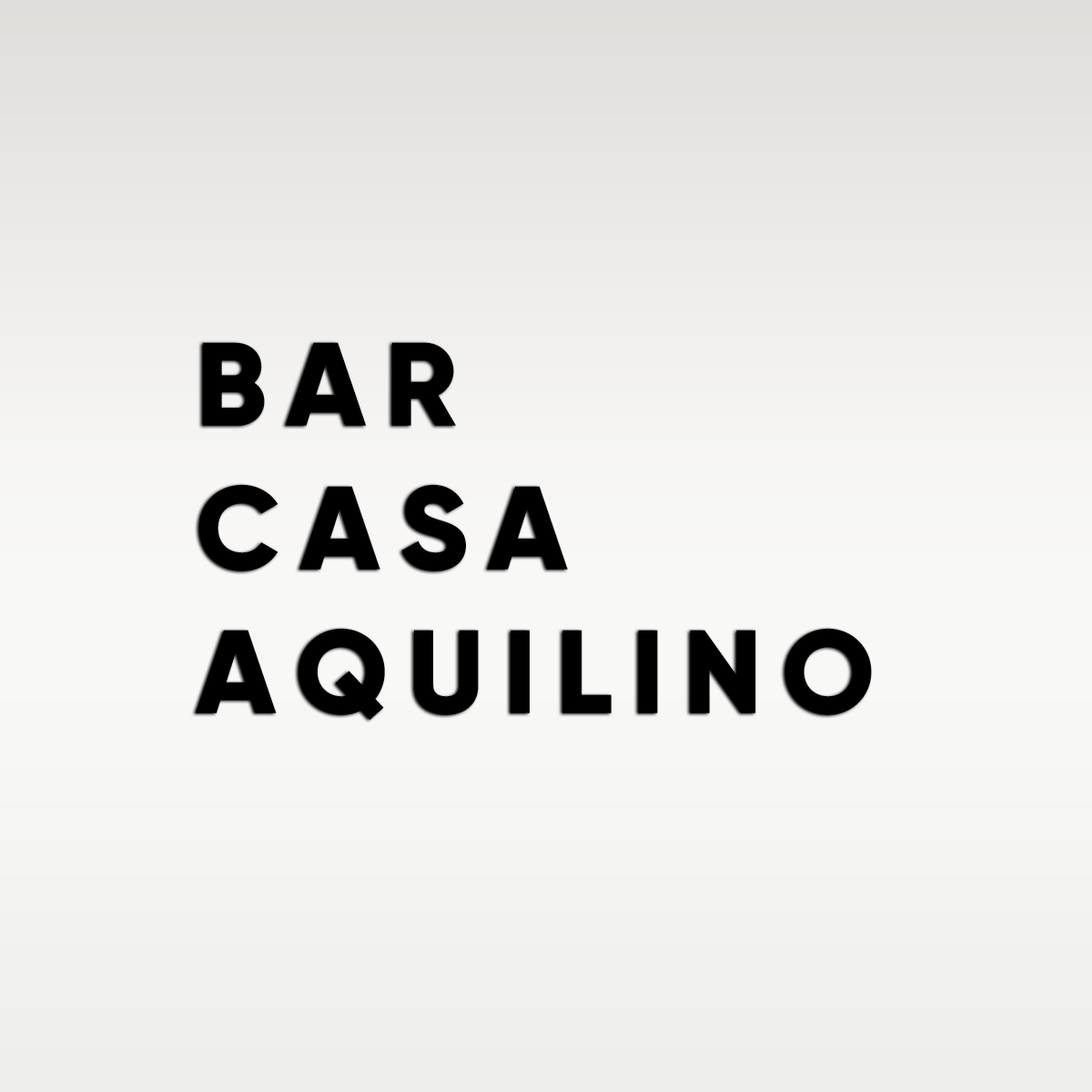
<style>
.page{position:relative;width:1092px;height:1092px}
.page>*{position:absolute;margin:0}
.t1{font:118.3px/143.8px "Gilroy-ExtraBold";letter-spacing:0.16em;color:#000000}
</style>
<div class="page">
<p class="t1" style="left:195px;top:342px;width:677px;height:378px">BAR <br>CASA<br>AQUILINO</p>
</div>
